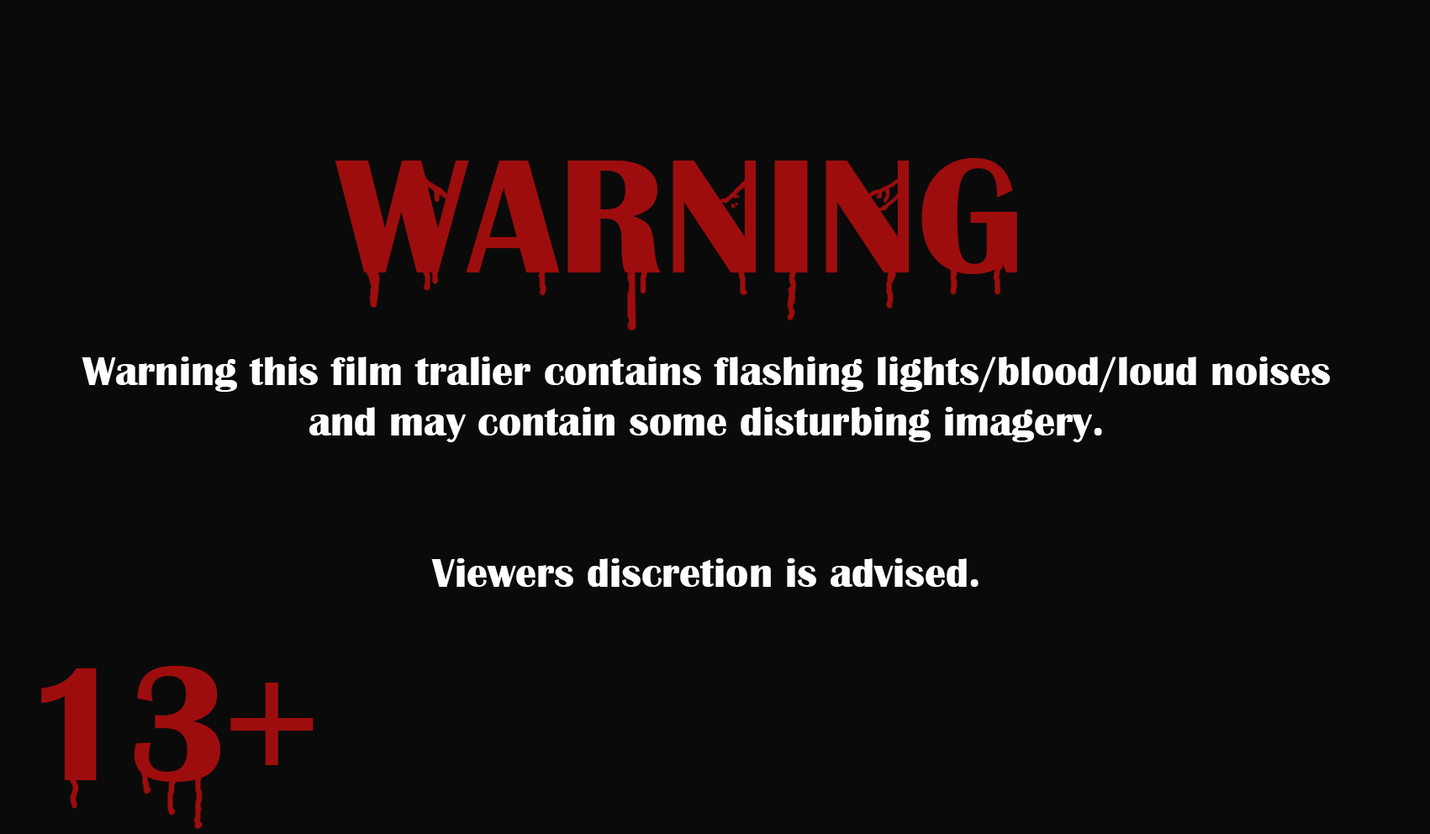
<style>
.page{position:relative;width:1430px;height:834px;background:#0a0a0a}
.page>*{position:absolute;margin:0}
.t1{font:168.1px "BritannicBold";color:#9e0d0d}
.t2{font:42px "BritannicBold";color:#ffffff}
</style>
<div class="page">
<p class="t1" style="left:335px;top:158px;width:682px;height:116px">WARNING</p>
<p class="t2" style="left:82px;top:356px;width:1248px;height:231px;text-align:center">Warning this film tralier contains flashing lights/blood/loud noises<br>and may contain some disturbing imagery.<br><br><br>Viewers discretion is advised.</p>
</div>
